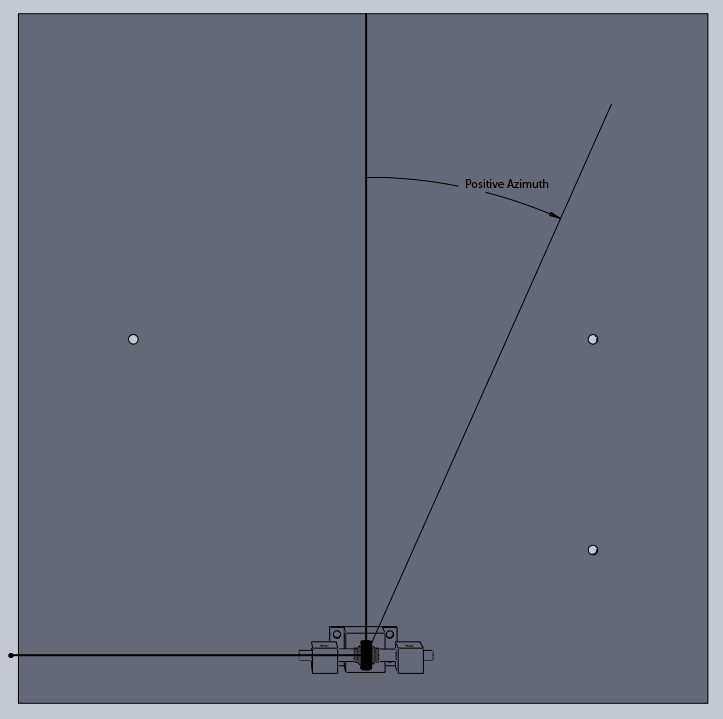
<style>
.page{position:relative;width:723px;height:719px;background:#656877}
.page>*{position:absolute;margin:0}
.t1{font:12px "MyriadPro-Regular";color:#000000}
</style>
<div class="page">
<p class="t1" style="left:466px;top:179px;width:83px;height:9px">Positive Azimuth</p>
</div>
